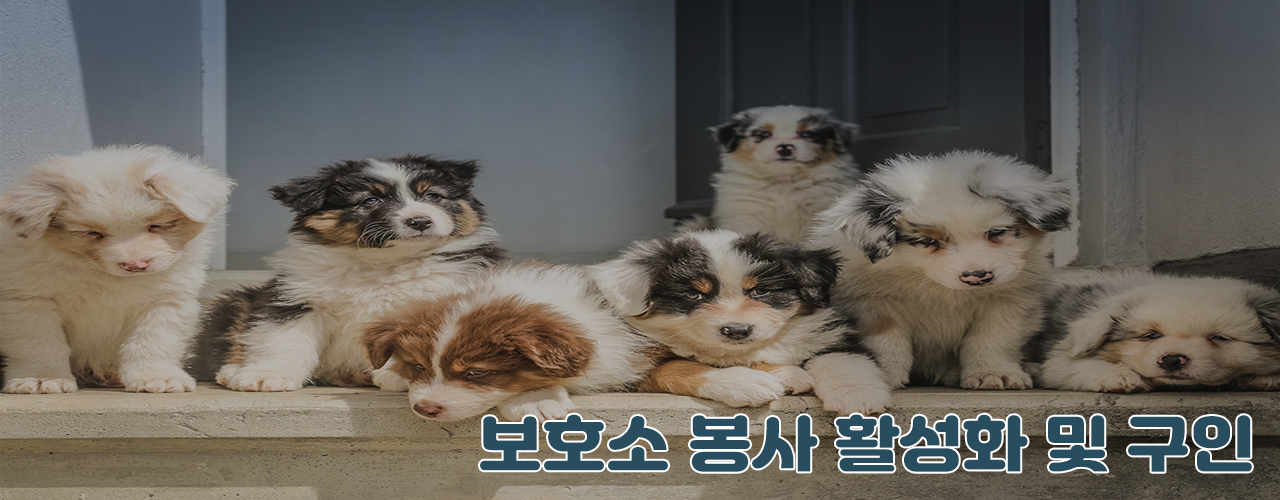
<style>
.page{position:relative;width:1280px;height:500px}
.page>*{position:absolute;margin:0}
.t1{font:60px "Jalnan";color:#284d5f;scale:1.07 1}
</style>
<div class="page">
<p class="t1" style="left:480px;top:414px;width:772px;height:58px">보호소 봉사 활성화 및 구인</p>
</div>
